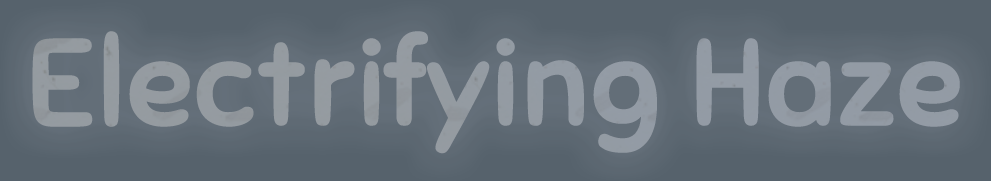
<style>
.page{position:relative;width:991px;height:181px;background:#56626c}
.page>*{position:absolute;margin:0}
.t1{font:120px "Sniglet-Regular";color:#939ba2;font-weight:bold}
</style>
<div class="page">
<p class="t1" style="left:32px;top:31px;width:928px;height:123px">Electrifying Haze</p>
</div>
